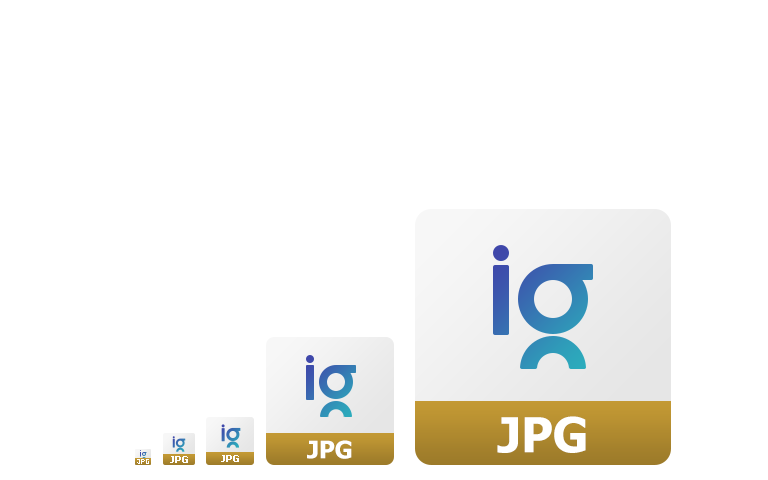
<style>
.page{position:relative;width:768px;height:480px;background:#ffffff}
.page>*{position:absolute;margin:0}
.t1{font:48px "Tahoma-Bold";color:#ffffff}
.t2{font:24px "Tahoma-Bold";color:#ffffff}
.t3{font:10px "Tahoma-Bold";color:#ffffff}
</style>
<div class="page">
<p class="t1" style="left:497px;top:416px;width:89px;height:37px">JPG</p>
<p class="t2" style="left:307px;top:440px;width:45px;height:19px">JPG</p>
<p class="t3" style="left:170px;top:456px;width:18px;height:7px">JPG</p>
<p class="t3" style="left:221px;top:455px;width:18px;height:7px">JPG</p>
</div>
